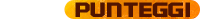
<style>
.page{position:relative;width:200px;height:19px;background:#ffffff}
.page>*{position:absolute;margin:0}
.t1{font:25px "MTV2C";color:#501401;text-transform:uppercase;scale:1.2 1}
</style>
<div class="page">
<p class="t1" style="left:75px;top:2px;width:115px;height:15px">PUNTEGGI</p>
</div>
